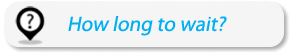
<style>
.page{position:relative;width:291px;height:54px;background:#f5f5f5}
.page>*{position:absolute;margin:0}
.t1{font:21px "MyriadPro-Regular";color:#00b0f0;font-style:italic}
</style>
<div class="page">
<p class="t1" style="left:68px;top:16px;width:159px;height:20px">How long to wait?</p>
</div>
